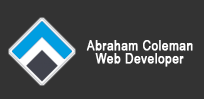
<style>
.page{position:relative;width:204px;height:99px;background:#333333}
.page>*{position:absolute;margin:0}
.t1{font:14px "ArialNarrow";letter-spacing:0.025em;color:#ffffff;font-weight:bold}
</style>
<div class="page">
<p class="t1" style="left:86px;top:40px;width:107px;height:11px">Abraham Coleman</p>
<p class="t1" style="left:95px;top:53px;width:89px;height:14px">Web Developer</p>
</div>
